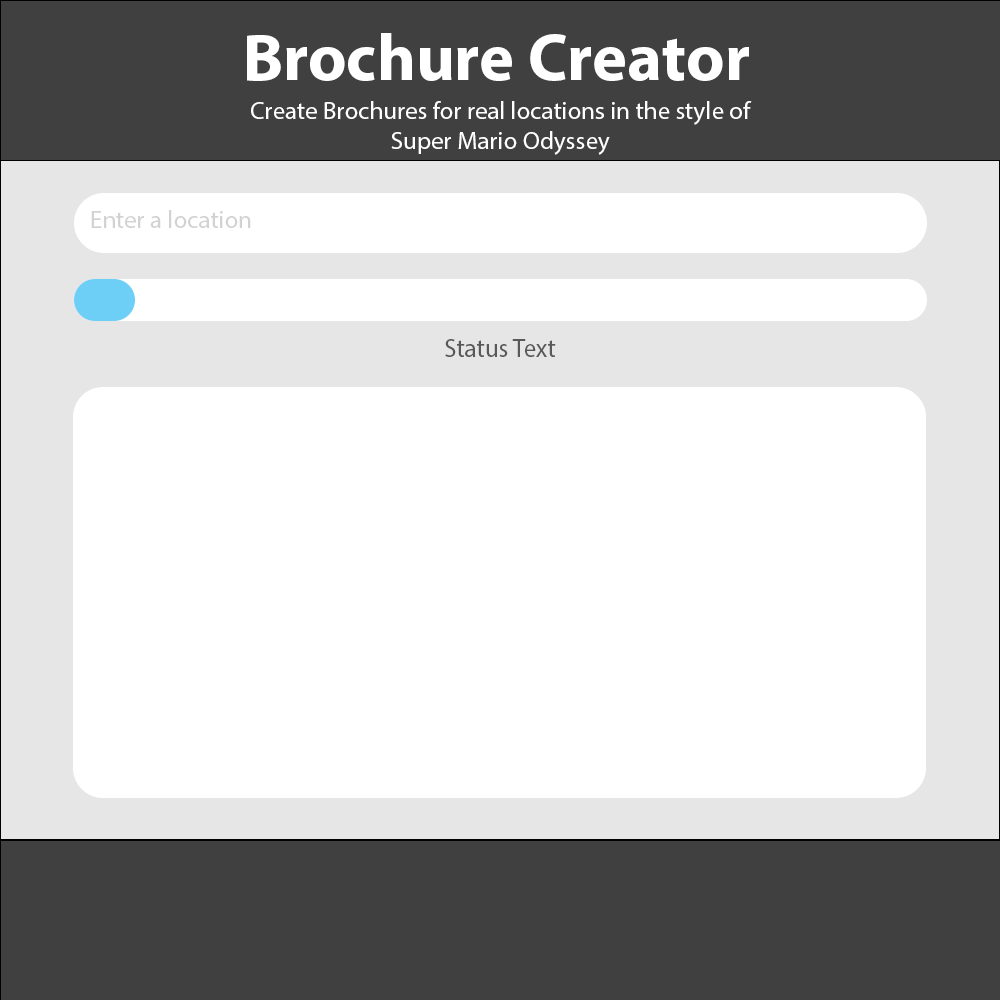
<style>
.page{position:relative;width:1000px;height:1000px;background:#ffffff}
.page>*{position:absolute;margin:0}
.t1{font:66.7px "MyriadPro-Bold";color:#ffffff}
.t2{font:25px "MyriadPro-Regular";color:#ffffff}
.t3{font:24.9px "MyriadPro-Regular";color:#d2d2d2}
.t4{font:25.5px "MyriadPro-Regular";color:#595959}
</style>
<div class="page">
<p class="t1" style="left:247px;top:33px;width:502px;height:48px">Brochure Creator</p>
<p class="t2" style="left:251px;top:101px;width:501px;height:54px;text-align:center">Create Brochures for real locations in the style of Super Mario Odyssey</p>
<p class="t3" style="left:91px;top:210px;width:160px;height:18px">Enter a location</p>
<p class="t4" style="left:445px;top:339px;width:111px;height:18px">Status Text</p>
</div>
